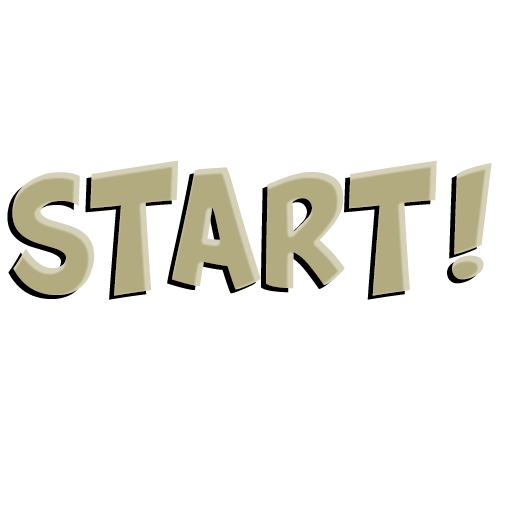
<style>
.page{position:relative;width:512px;height:512px;background:#ffffff}
.page>*{position:absolute;margin:0}
.t1{font:95px "Splatch";color:#b3ab80}
</style>
<div class="page">
<p class="t1" style="left:12px;top:160px;width:480px;height:136px">START!</p>
</div>
